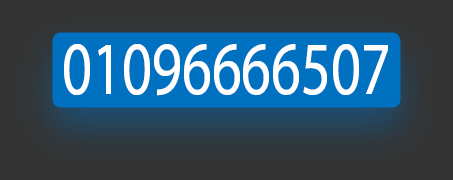
<style>
.page{position:relative;width:453px;height:180px;background:#333333}
.page>*{position:absolute;margin:0}
.t1{font:106.6px "MyriadArabic-Regular";color:#ffffff;scale:0.77 1}
</style>
<div class="page">
<p class="t1" style="left:64px;top:44px;width:324px;height:52px">01096666507</p>
</div>
